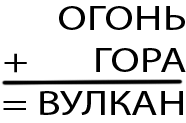
<style>
.page{position:relative;width:186px;height:123px;background:#ffffff}
.page>*{position:absolute;margin:0}
.t1{font:35.4px "MyriadPro-Regular";color:#000000;scale:1.23 1}
</style>
<div class="page">
<p class="t1" style="left:3px;top:6px;width:183px;height:109px;text-align:right">ОГОНЬ<br>+       ГОРА<br>= ВУЛКАН</p>
</div>
